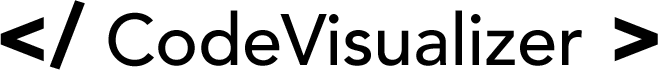
<style>
.page{position:relative;width:658px;height:70px;background:#ffffff}
.page>*{position:absolute;margin:0}
.t1{font:72px "Avenir-Medium";letter-spacing:-0.005em;color:#000000}
.t2{font:85px "Avenir-Black";letter-spacing:-0.005em;color:#000000}
</style>
<div class="page">
<p class="t1" style="left:0px;top:0px;width:658px;height:70px"><span class="t2">&lt;/ </span>CodeVisualizer <span class="t2">&gt;</span></p>
</div>
